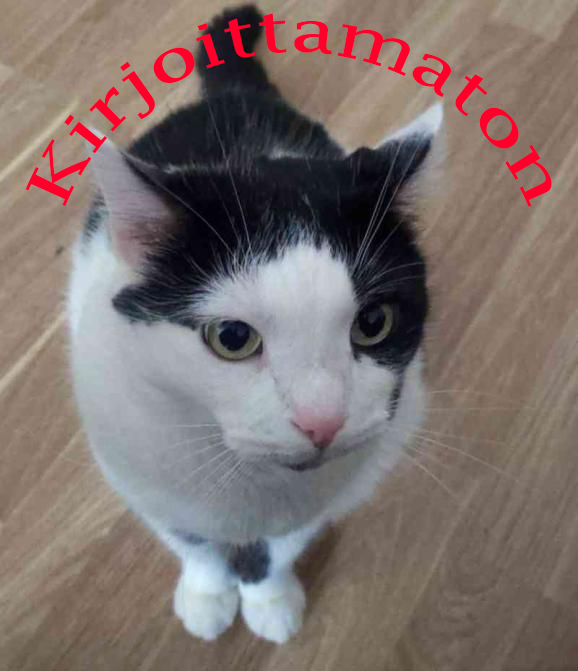
<style>
.page{position:relative;width:578px;height:671px}
.page>*{position:absolute;margin:0}
.t1{font:60px "LucidaFax";color:#ff002a}
</style>
<div class="page">
<p class="t1" style="left:25px;top:13px;width:527px;height:194px">Kirjoittamaton</p>
</div>
